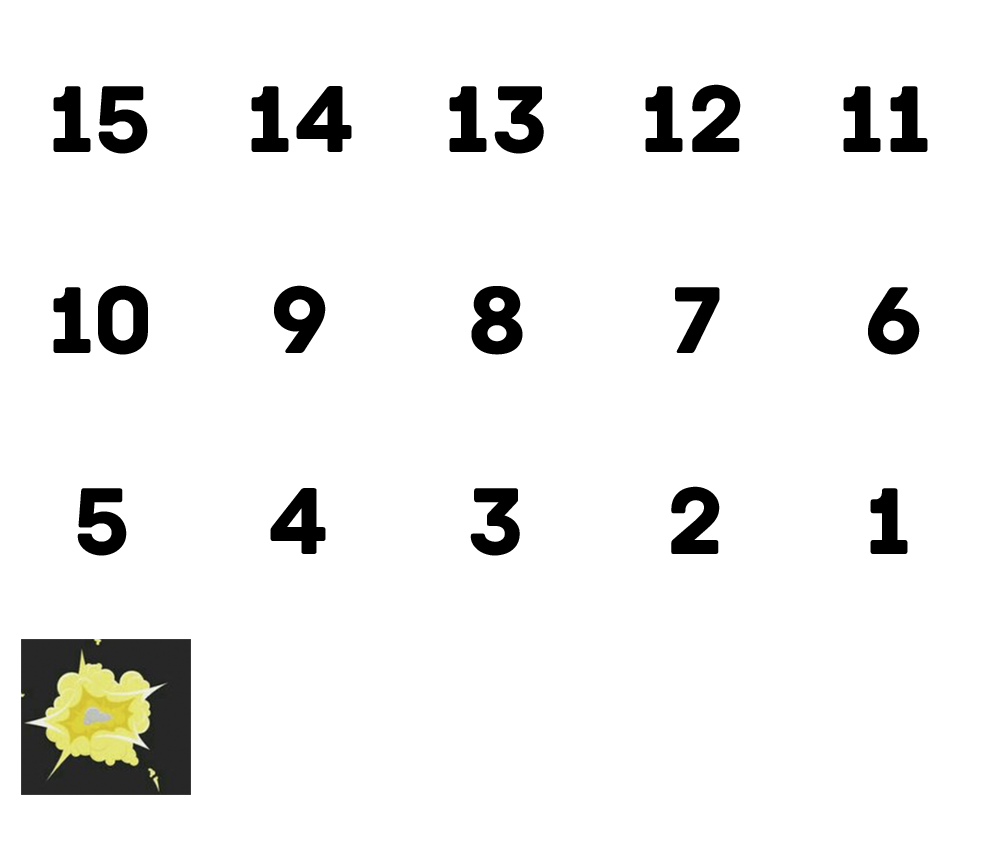
<style>
.page{position:relative;width:1005px;height:845px;background:#ffffff}
.page>*{position:absolute;margin:0}
.t1{font:100px "Archive-Regular";color:#000000}
</style>
<div class="page">
<p class="t1" style="left:53px;top:86px;width:95px;height:68px">15</p>
<p class="t1" style="left:251px;top:86px;width:101px;height:66px">14</p>
<p class="t1" style="left:449px;top:86px;width:95px;height:68px">13</p>
<p class="t1" style="left:645px;top:84px;width:96px;height:68px">12</p>
<p class="t1" style="left:843px;top:86px;width:85px;height:66px">11</p>
<p class="t1" style="left:53px;top:285px;width:95px;height:70px">10</p>
<p class="t1" style="left:274px;top:285px;width:52px;height:68px">9</p>
<p class="t1" style="left:471px;top:286px;width:52px;height:69px">8</p>
<p class="t1" style="left:675px;top:287px;width:45px;height:66px">7</p>
<p class="t1" style="left:868px;top:287px;width:52px;height:68px">6</p>
<p class="t1" style="left:671px;top:486px;width:49px;height:68px">2</p>
<p class="t1" style="left:77px;top:488px;width:50px;height:68px">5</p>
<p class="t1" style="left:270px;top:488px;width:56px;height:66px">4</p>
<p class="t1" style="left:470px;top:488px;width:50px;height:68px">3</p>
<p class="t1" style="left:870px;top:488px;width:38px;height:66px">1</p>
</div>
